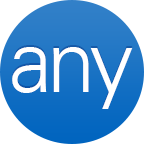
<style>
.page{position:relative;width:144px;height:144px;background:#ffffff}
.page>*{position:absolute;margin:0}
.t1{font:86.5px "Univers-Light";letter-spacing:-0.06em;color:#ffffff}
</style>
<div class="page">
<p class="t1" style="left:12px;top:47px;width:121px;height:62px">any</p>
</div>
